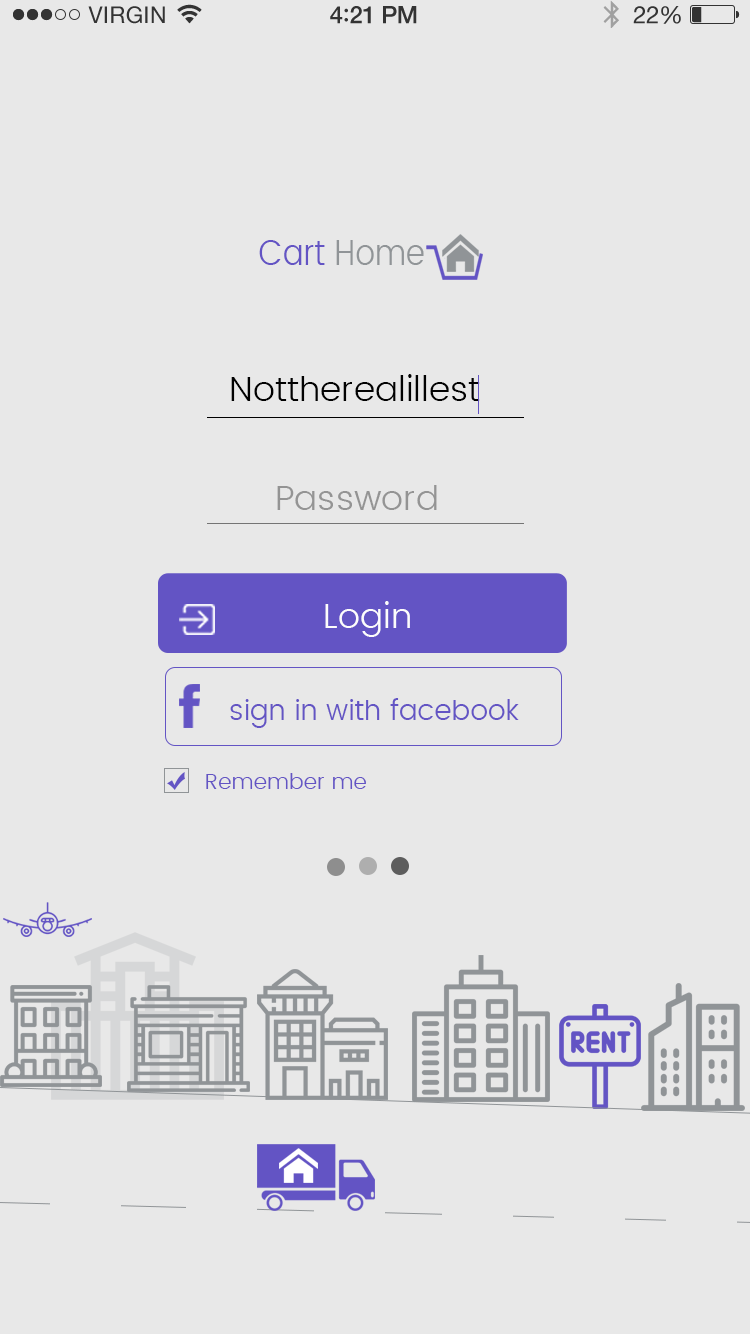
<style>
.page{position:relative;width:750px;height:1334px;background:#e8e8e8}
.page>*{position:absolute;margin:0}
.t1{font:35.8px "Poppins-Light";color:#6354c4;scale:0.87 1}
.t2{font:35.8px "Poppins-Light";color:#909497;scale:0.87 1}
.t3{font:35px "Poppins-Light";color:#010101}
.t4{font:35px "Poppins-Light";color:#949494}
.t5{font:35px "Poppins-Light";color:#fdfcfc}
.t6{font:28.2px "Poppins-Light";color:#6354c4}
.t7{font:22.1px "Poppins-Light";color:#6354c4}
</style>
<div class="page">
<p class="t1" style="left:259px;top:240px;width:165px;height:25px">Cart <span class="t2">Home</span></p>
<p class="t3" style="left:231px;top:374px;width:249px;height:27px">Nottherealillest</p>
<p class="t4" style="left:277px;top:485px;width:160px;height:25px">Password</p>
<p class="t5" style="left:325px;top:601px;width:85px;height:36px">Login</p>
<p class="t6" style="left:230px;top:698px;width:289px;height:30px">sign in with facebook</p>
<p class="t7" style="left:206px;top:773px;width:160px;height:16px">Remember me</p>
</div>
